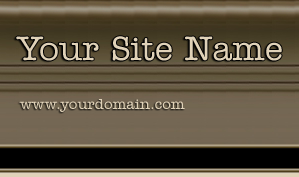
<style>
.page{position:relative;width:299px;height:177px}
.page>*{position:absolute;margin:0}
.t1{font:35px "AmerTypewriterITCbyBT-Medium";color:#e0d2b8}
.t2{font:15px "AmerTypewriterITCbyBT-Medium";color:#e0d2b8}
</style>
<div class="page">
<p class="t1" style="left:16px;top:36px;width:266px;height:25px">Your Site Name</p>
<p class="t2" style="left:19px;top:99px;width:166px;height:13px">www.yourdomain.com</p>
</div>
